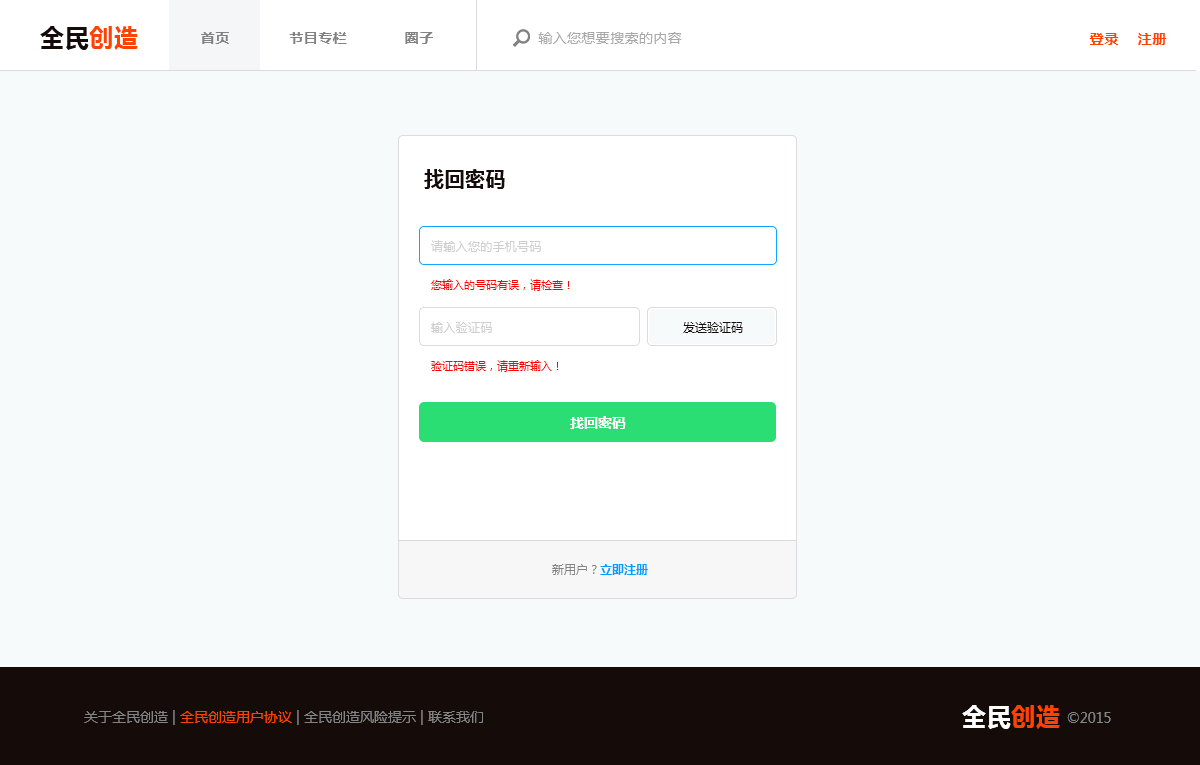
<style>
.page{position:relative;width:1200px;height:765px;background:#f7fafa}
.page>*{position:absolute;margin:0}
.t1{font:24px "MicrosoftYaHei-Bold";letter-spacing:0.025em;color:#150b09}
.t2{font:24px "MicrosoftYaHei-Bold";letter-spacing:0.025em;color:#ff4200}
.t3{font:14px "MicrosoftYaHei-Bold";letter-spacing:0.025em;color:#828282}
.t4{font:14px "MicrosoftYaHei";letter-spacing:0.025em;color:#a9a9a9}
.t5{font:14px "MicrosoftYaHei-Bold";letter-spacing:0.05em;color:#ff4200}
.t6{font:20px "MicrosoftYaHei-Bold";letter-spacing:0.025em;color:#150b09}
.t7{font:12px "MicrosoftYaHei";letter-spacing:0.025em;color:#cecece}
.t8{font:11px "MicrosoftYaHei";color:#ff0000}
.t9{font:12px "MicrosoftYaHei";color:#150b09}
.t10{font:14px "MicrosoftYaHei-Bold";color:#ffffff}
.t11{font:12px "MicrosoftYaHei";color:#838383}
.t12{font:12px "MicrosoftYaHei-Bold";color:#00a0ff}
.t13{font:14px "MicrosoftYaHei";color:#828587}
.t14{font:14px "MicrosoftYaHei";color:#ff4200}
.t15{font:24px "MicrosoftYaHei-Bold";letter-spacing:0.025em;color:#ffffff}
</style>
<div class="page">
<p class="t1" style="left:40px;top:26px;width:98px;height:24px">全民<span class="t2">创造</span></p>
<p class="t3" style="left:201px;top:32px;width:28px;height:12px">首页</p>
<p class="t3" style="left:289px;top:32px;width:58px;height:12px">节目专栏</p>
<p class="t3" style="left:405px;top:32px;width:28px;height:12px">圈子</p>
<p class="t4" style="left:538px;top:32px;width:144px;height:12px">输入您想要搜索的内容</p>
<p class="t5" style="left:1089px;top:33px;width:30px;height:12px">登录</p>
<p class="t5" style="left:1138px;top:33px;width:29px;height:12px">注册</p>
<p class="t6" style="left:424px;top:169px;width:81px;height:20px">找回密码</p>
<p class="t7" style="left:431px;top:240px;width:110px;height:12px">请输入您的手机号码</p>
<p class="t8" style="left:431px;top:279px;width:139px;height:12px">您输入的号码有误，请检查！</p>
<p class="t7" style="left:431px;top:322px;width:61px;height:11px">输入验证码</p>
<p class="t9" style="left:683px;top:322px;width:60px;height:11px">发送验证码</p>
<p class="t8" style="left:431px;top:360px;width:128px;height:12px">验证码错误，请重新输入！</p>
<p class="t10" style="left:570px;top:416px;width:56px;height:13px">找回密码</p>
<p class="t11" style="left:552px;top:564px;width:96px;height:11px">新用户？<span class="t12">立即注册</span></p>
<p class="t13" style="left:84px;top:710px;width:399px;height:15px">关于全民创造 | <span class="t14">全民创造用户协议</span> | 全民创造风险提示 | 联系我们</p>
<p class="t15" style="left:962px;top:705px;width:98px;height:24px">全民<span class="t2">创造</span></p>
<p class="t13" style="left:1067px;top:712px;width:44px;height:11px">©2015</p>
</div>
